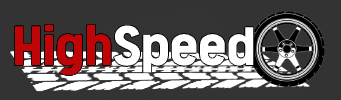
<style>
.page{position:relative;width:341px;height:100px;background:#333333}
.page>*{position:absolute;margin:0}
.t1{font:50.4px "dDiam";color:#ffffff}
.t2{font:50.4px "dDiam";color:#bf0507}
</style>
<div class="page">
<p class="t1" style="left:15px;top:24px;width:239px;height:52px"><span class="t2">High</span>Speed</p>
</div>
